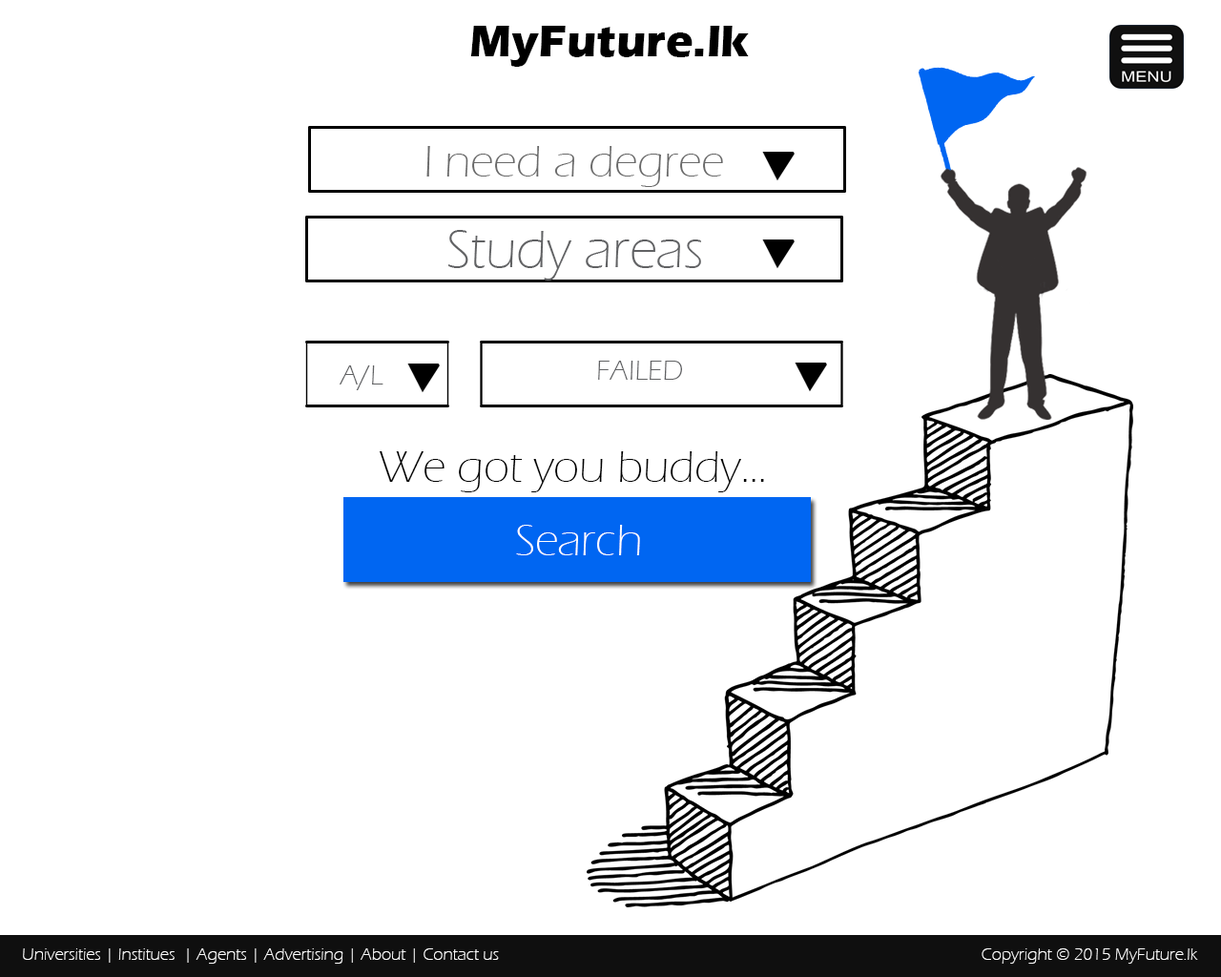
<style>
.page{position:relative;width:1221px;height:977px;background:#ffffff}
.page>*{position:absolute;margin:0}
.t1{font:45.8px "ErasITC-Bold";color:#000000}
.t2{font:45.8px "ErasITC-Light";color:#696969}
.t3{font:54.6px "ErasITC-Light";color:#616264}
.t4{font:28.6px "ErasITC-Light";color:#616264}
.t5{font:45.8px "ErasITC-Light";color:#000000}
.t6{font:45.8px "ErasITC-Light";color:#ffffff}
.t7{font:17.2px "ErasITC-Light";color:#ffffff}
</style>
<div class="page">
<p class="t1" style="left:470px;top:26px;width:279px;height:41px">MyFuture.lk</p>
<p class="t2" style="left:426px;top:146px;width:297px;height:41px">I need a degree</p>
<p class="t3" style="left:447px;top:230px;width:254px;height:50px">Study areas</p>
<p class="t4" style="left:340px;top:365px;width:43px;height:25px">A/L</p>
<p class="t4" style="left:598px;top:361px;width:84px;height:19px">FAILED</p>
<p class="t5" style="left:379px;top:451px;width:385px;height:41px">We got you buddy...</p>
<p class="t6" style="left:516px;top:525px;width:124px;height:30px">Search</p>
<p class="t7" style="left:23px;top:948px;width:476px;height:15px">Universities | Institues  | Agents | Advertising | About | Contact us</p>
<p class="t7" style="left:981px;top:948px;width:217px;height:15px">Copyright © 2015 MyFuture.lk</p>
</div>
